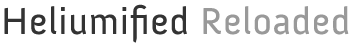
<style>
.page{position:relative;width:350px;height:50px;background:#ffffff}
.page>*{position:absolute;margin:0}
.t1{font:38px "Anivers-Regular";letter-spacing:0.025em;color:#333333}
.t2{font:38px "Anivers-Regular";letter-spacing:0.025em;color:#999999}
</style>
<div class="page">
<p class="t1" style="left:4px;top:4px;width:345px;height:39px">Heliumified<span class="t2"> Reloaded</span></p>
</div>
